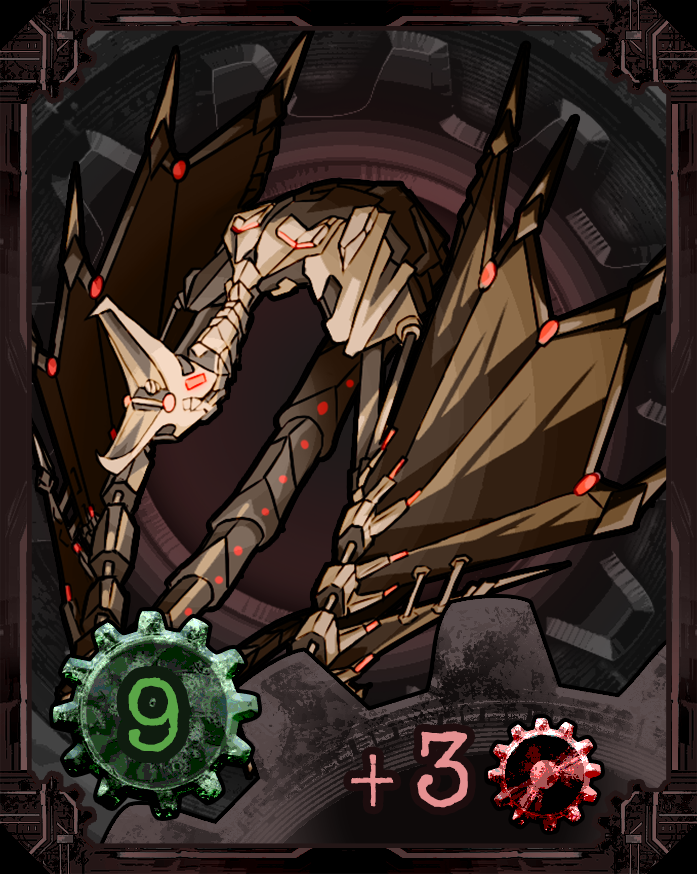
<style>
.page{position:relative;width:697px;height:874px}
.page>*{position:absolute;margin:0}
.t1{font:108.3px "AmerTypewriterITCbyBT-Medium";color:#5aa647}
.t2{font:85.8px "AmerTypewriterITCbyBT-Medium";color:#e69192}
.t3{font:114.4px "AmerTypewriterITCbyBT-Medium";color:#e69192}
</style>
<div class="page">
<p class="t1" style="left:128px;top:677px;width:51px;height:75px">9</p>
<p class="t2" style="left:351px;top:731px;width:117px;height:77px">+<span class="t3">3</span></p>
</div>
